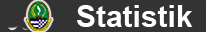
<style>
.page{position:relative;width:206px;height:32px;background:#333333}
.page>*{position:absolute;margin:0}
.t1{font:30px "Arial-BoldMT";color:#ffffff}
</style>
<div class="page">
<p class="t1" style="left:77px;top:5px;width:116px;height:22px">Statistik</p>
</div>
